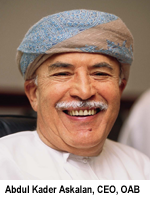
<style>
.page{position:relative;width:150px;height:200px}
.page>*{position:absolute;margin:0}
.t1{font:10.6px "ArialNarrow-Bold";color:#000000}
</style>
<div class="page">
<p class="t1" style="left:5px;top:185px;width:135px;height:10px">Abdul Kader Askalan, CEO, OAB</p>
</div>
